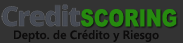
<style>
.page{position:relative;width:183px;height:43px;background:#333333}
.page>*{position:absolute;margin:0}
.t1{font:23.5px "Arial-Black";color:#268a0f;scale:0.8 1}
.t2{font:12px "SegoeUI-SemiBold";color:#0c0b0b}
</style>
<div class="page">
<p class="t1" style="left:81px;top:9px;width:96px;height:18px">SCORING</p>
<p class="t2" style="left:14px;top:29px;width:145px;height:13px">Depto. de Crédito y Riesgo</p>
</div>
